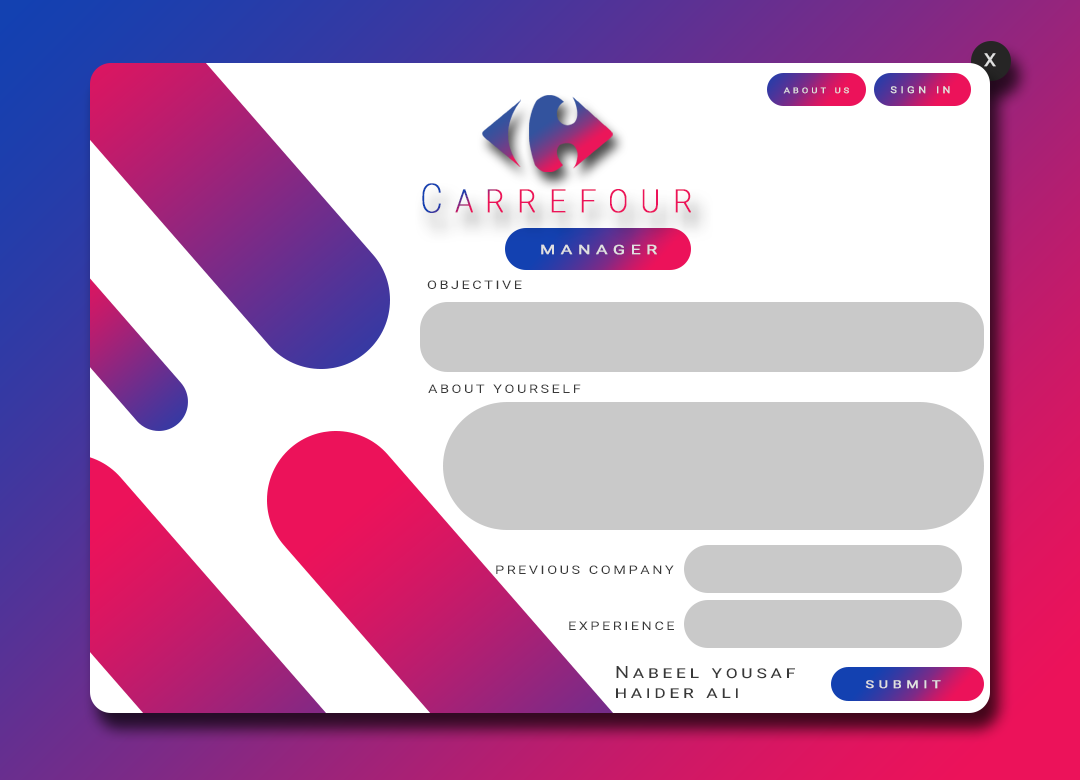
<style>
.page{position:relative;width:1080px;height:780px;background:#ffffff}
.page>*{position:absolute;margin:0}
.t1{font:18px "Roboto-Regular";letter-spacing:0.3em;color:#e0e0e0;font-weight:bold;scale:1.05 1}
.t2{font:7.9px "Roboto-Regular";letter-spacing:0.3em;color:#e0e0e0;text-transform:uppercase;font-weight:bold;scale:1.19 1}
.t3{font:9.4px "Roboto-Regular";letter-spacing:0.3em;color:#e0e0e0;text-transform:uppercase;font-weight:bold;scale:1.17 1}
.t4{font:40px "Roboto-Thin";letter-spacing:0.35em;color:#ec125a;font-variant:small-caps;font-weight:bold;scale:0.85 1}
.t5{font:13px "Roboto-Regular";letter-spacing:0.3em;color:#e0e0e0;text-transform:uppercase;font-weight:bold;scale:1.34 1}
.t6{font:12px "Roboto-Regular";letter-spacing:0.18em;color:#383838;text-transform:uppercase;scale:1.2 1}
.t7{font:16.9px "Roboto-Regular";letter-spacing:0.18em;color:#383838;font-variant:small-caps;scale:1.2 1}
.t8{font:10.7px "Roboto-Regular";letter-spacing:0.3em;color:#e0e0e0;text-transform:uppercase;font-weight:bold;scale:1.34 1}
</style>
<div class="page">
<p class="t1" style="left:984px;top:53px;width:12px;height:14px">X</p>
<p class="t2" style="left:783px;top:87px;width:66px;height:7px">About Us</p>
<p class="t3" style="left:890px;top:86px;width:60px;height:8px">Sign in</p>
<p class="t4" style="left:422px;top:183px;width:269px;height:30px">Carrefour</p>
<p class="t5" style="left:541px;top:244px;width:116px;height:11px">Manager</p>
<p class="t6" style="left:427px;top:280px;width:95px;height:9px">objective</p>
<p class="t6" style="left:428px;top:384px;width:153px;height:9px">About Yourself</p>
<p class="t6" style="left:496px;top:565px;width:178px;height:9px">Previous Company</p>
<p class="t6" style="left:569px;top:621px;width:105px;height:9px">experience</p>
<p class="t7" style="left:616px;top:666px;width:179px;height:32px">Nabeel yousaf<br>haider ali</p>
<p class="t8" style="left:865px;top:680px;width:76px;height:9px">Submit</p>
</div>
